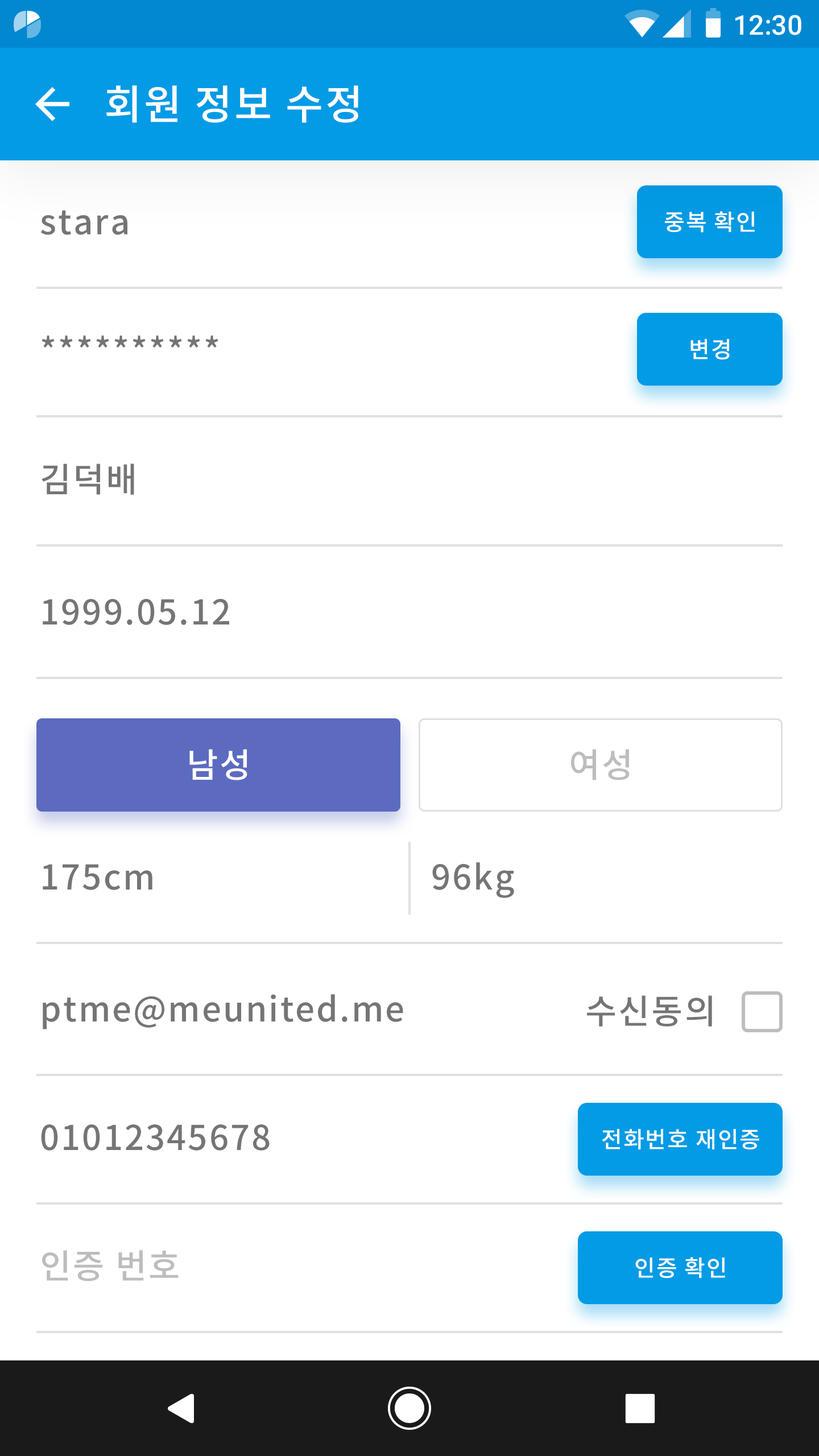
<style>
.page{position:relative;width:819px;height:1456px;background:#ffffff}
.page>*{position:absolute;margin:0}
.t1{font:27.3px "Roboto-Medium";color:#ffffff}
.t2{font:40.9px "NotoSansCJKkr-Medium";letter-spacing:0.05em;color:#ffffff}
.t3{font:34.1px "NotoSansCJKkr-Medium";letter-spacing:0.05em;color:#757575}
.t4{font:22.7px "NotoSansCJKkr-Medium";letter-spacing:0.05em;color:#ffffff}
.t5{font:34.1px "NotoSansCJKkr-Medium";letter-spacing:0.05em;color:#ffffff}
.t6{font:34.1px "NotoSansCJKkr-Medium";letter-spacing:0.05em;color:#bdbdbd}
</style>
<div class="page">
<p class="t1" style="left:735px;top:15px;width:66px;height:20px">12:30</p>
<p class="t2" style="left:106px;top:85px;width:252px;height:38px">회원 정보 수정</p>
<p class="t3" style="left:40px;top:210px;width:87px;height:25px">stara</p>
<p class="t4" style="left:665px;top:211px;width:90px;height:22px">중복 확인</p>
<p class="t3" style="left:42px;top:336px;width:176px;height:12px">**********</p>
<p class="t4" style="left:690px;top:339px;width:40px;height:20px">변경</p>
<p class="t3" style="left:42px;top:464px;width:92px;height:31px">김덕배</p>
<p class="t3" style="left:43px;top:599px;width:186px;height:26px">1999.05.12</p>
<p class="t5" style="left:189px;top:749px;width:58px;height:31px">남성</p>
<p class="t6" style="left:571px;top:749px;width:59px;height:31px">여성</p>
<p class="t3" style="left:43px;top:864px;width:109px;height:26px">175cm</p>
<p class="t3" style="left:432px;top:862px;width:82px;height:36px">96kg</p>
<p class="t3" style="left:43px;top:994px;width:360px;height:35px">ptme@meunited.me</p>
<p class="t3" style="left:587px;top:995px;width:125px;height:32px">수신동의</p>
<p class="t3" style="left:41px;top:1124px;width:229px;height:27px">01012345678</p>
<p class="t4" style="left:602px;top:1129px;width:157px;height:20px">전화번호 재인증</p>
<p class="t6" style="left:42px;top:1250px;width:137px;height:31px">인증 번호</p>
<p class="t4" style="left:635px;top:1257px;width:90px;height:21px">인증 확인</p>
</div>
